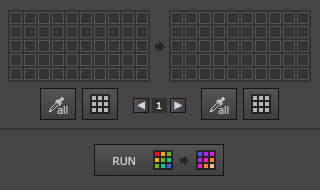
<style>
.page{position:relative;width:320px;height:190px;background:#454545}
.page>*{position:absolute;margin:0}
.t1{font:10px "Meiryo";color:#ffffff}
.t2{font:11px "Meiryo";color:#d2d2d2}
</style>
<div class="page">
<p class="t1" style="left:156px;top:102px;width:6px;height:7px">1</p>
<p class="t2" style="left:113px;top:157px;width:22px;height:8px">RUN</p>
</div>
